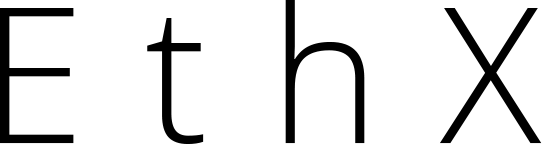
<style>
.page{position:relative;width:542px;height:144px;background:#ffffff}
.page>*{position:absolute;margin:0}
.t1{font:188px "OpenSans-Light";letter-spacing:0.32em;color:#000000}
</style>
<div class="page">
<p class="t1" style="left:0px;top:0px;width:542px;height:144px">EthX</p>
</div>
